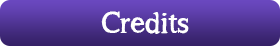
<style>
.page{position:relative;width:280px;height:46px}
.page>*{position:absolute;margin:0}
.t1{font:30px "asongforjenniferbold";color:#ffffff}
</style>
<div class="page">
<p class="t1" style="left:101px;top:11px;width:88px;height:23px">Credits</p>
</div>
